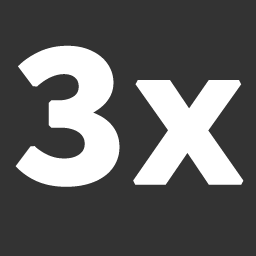
<style>
.page{position:relative;width:256px;height:256px;background:#333333}
.page>*{position:absolute;margin:0}
.t1{font:190px "BreezeSans-Bold";color:#ffffff;font-weight:bold;scale:1.05 1}
</style>
<div class="page">
<p class="t1" style="left:15px;top:45px;width:229px;height:142px">3x</p>
</div>
